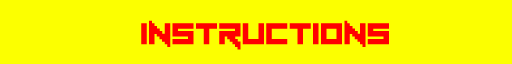
<style>
.page{position:relative;width:512px;height:64px;background:#fcff00}
.page>*{position:absolute;margin:0}
.t1{font:41.7px "Vermin-Vibes-1989";color:#ff0000}
</style>
<div class="page">
<p class="t1" style="left:141px;top:20px;width:248px;height:30px">Instructions</p>
</div>
